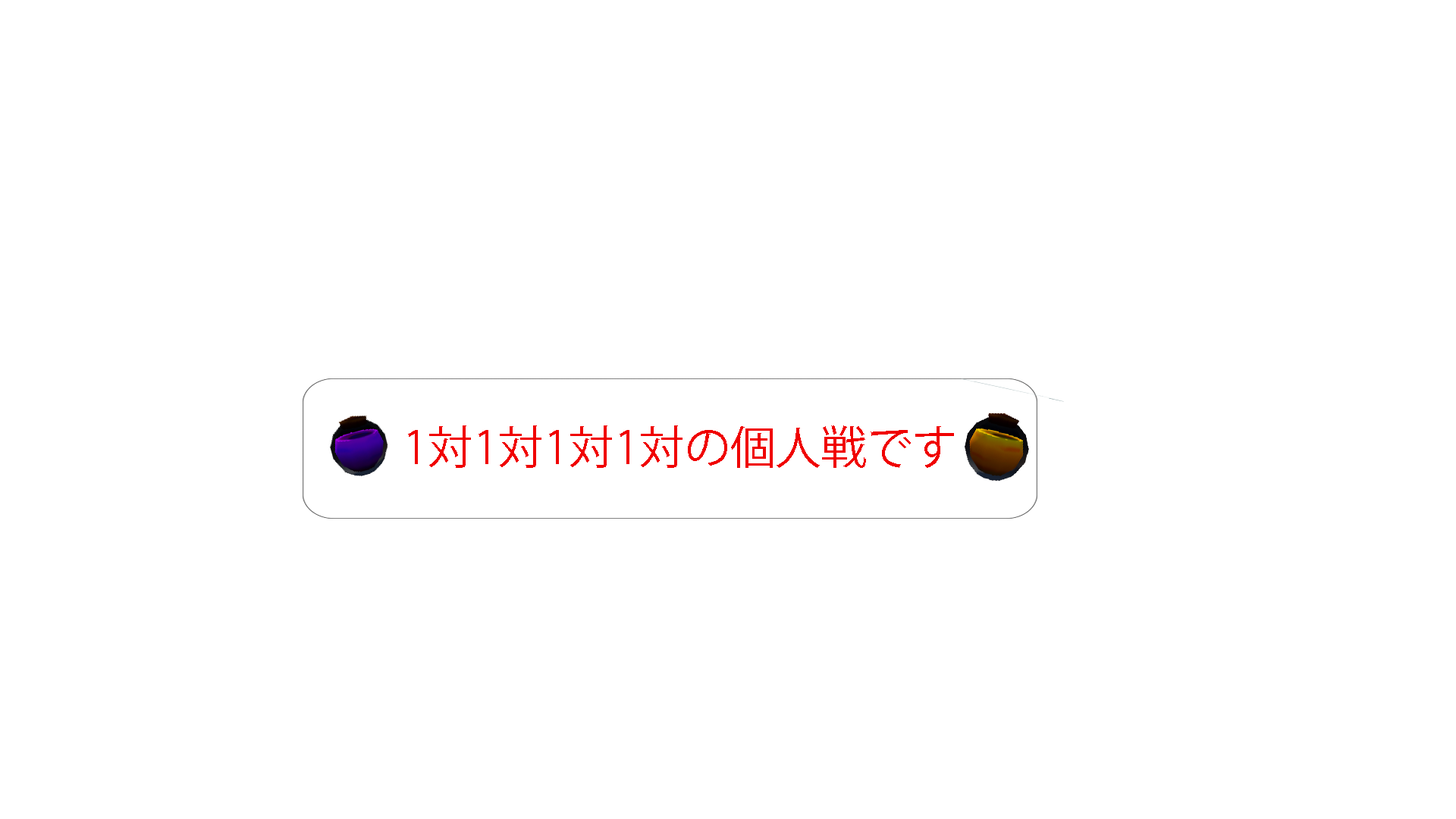
<style>
.page{position:relative;width:1456px;height:819px;background:#ffffff}
.page>*{position:absolute;margin:0}
.t1{font:45.5px "KozGoPr6N-Regular";color:#f00000}
</style>
<div class="page">
<p class="t1" style="left:408px;top:425px;width:546px;height:43px">1対1対1対1対の個人戦です</p>
</div>
